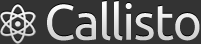
<style>
.page{position:relative;width:201px;height:44px;background:#333333}
.page>*{position:absolute;margin:0}
.t1{font:50px "Ubuntu-Regular";letter-spacing:-0.035em;color:#eaeaea}
</style>
<div class="page">
<p class="t1" style="left:47px;top:1px;width:153px;height:40px">Callisto</p>
</div>
